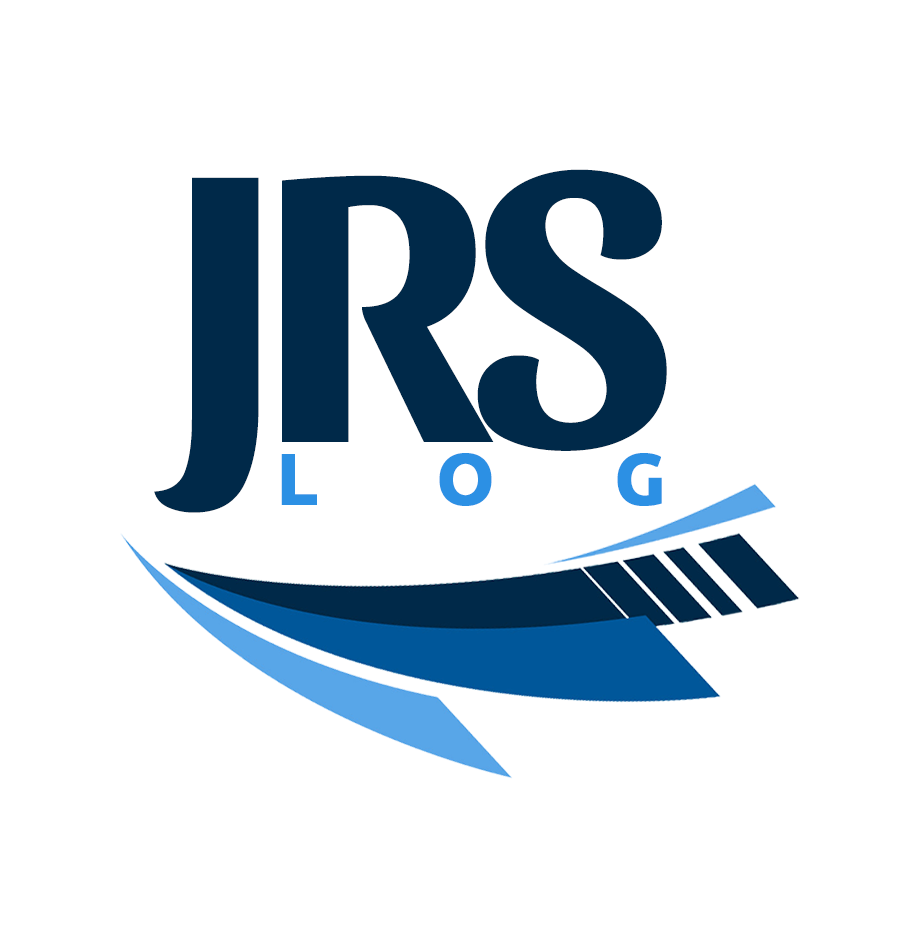
<style>
.page{position:relative;width:920px;height:948px;background:#ffffff}
.page>*{position:absolute;margin:0}
.t1{font:400.3px "Sansita-Bold";letter-spacing:-0.05em;color:#002949}
.t2{font:72.1px "Ubuntu-Bold";letter-spacing:1.65em;color:#2c90e4;font-weight:bold}
</style>
<div class="page">
<p class="t1" style="left:154px;top:169px;width:513px;height:344px">JRS</p>
<p class="t2" style="left:281px;top:453px;width:381px;height:53px">LOG</p>
</div>
